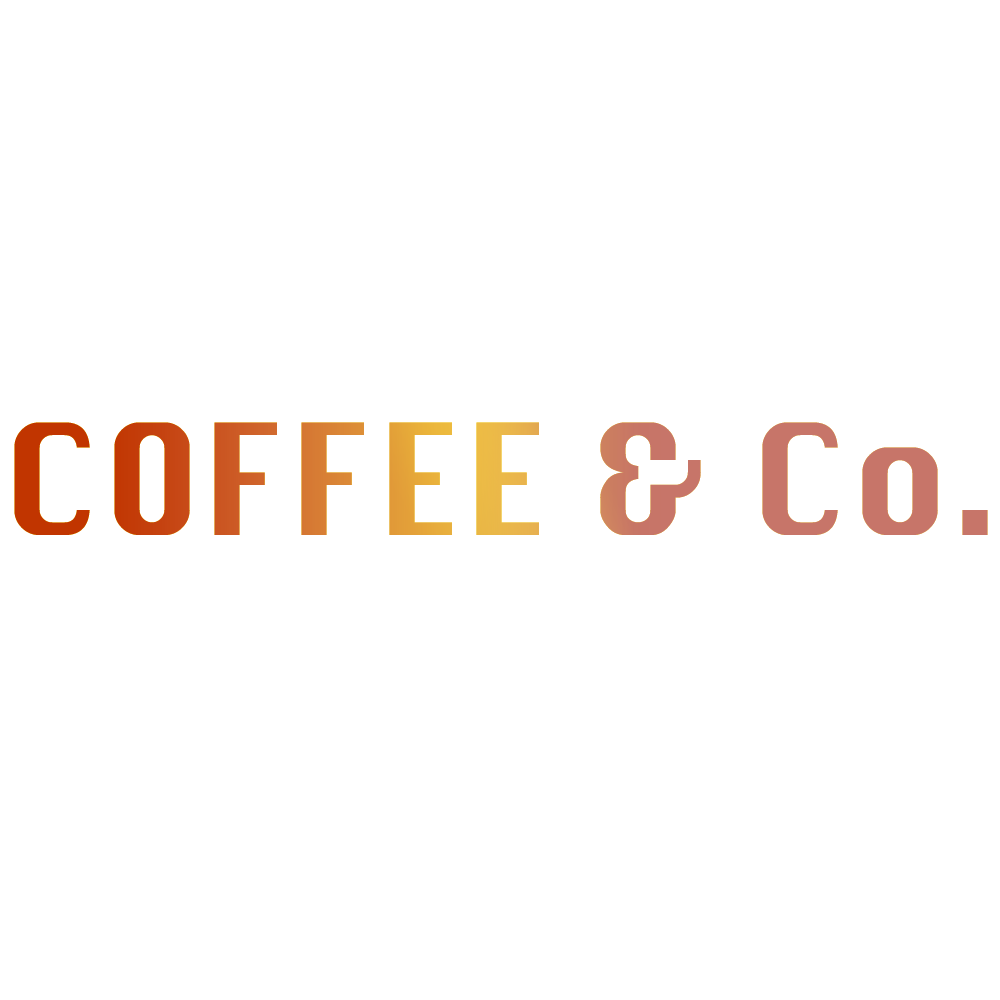
<style>
.page{position:relative;width:1000px;height:1000px;background:#ffffff}
.page>*{position:absolute;margin:0}
.t1{font:149.9px "Krungthep"}
</style>
<div class="page">
<p class="t1" style="left:14px;top:422px;width:974px;height:113px">COFFEE &amp; Co.</p>
<p class="t1" style="left:14px;top:422px;width:974px;height:113px">COFFEE &amp; Co.</p>
</div>
